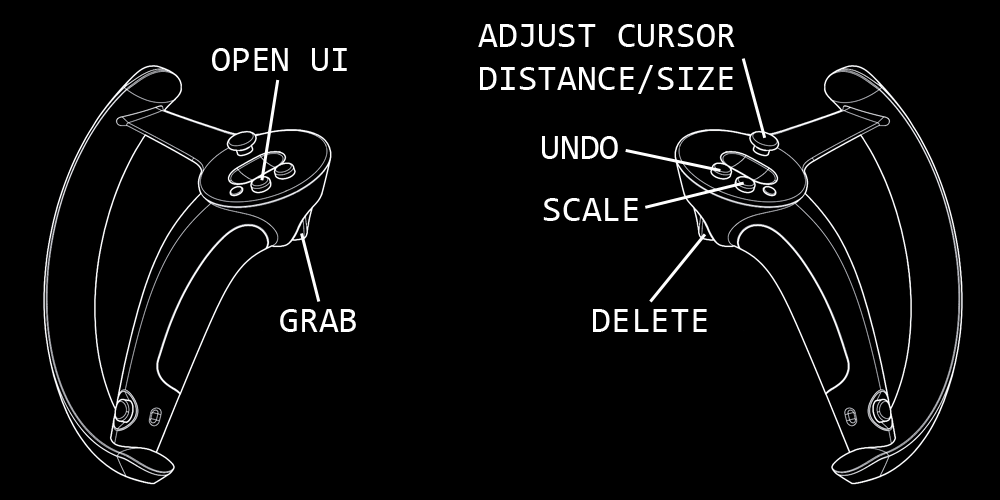
<style>
.page{position:relative;width:1000px;height:500px;background:#000000}
.page>*{position:absolute;margin:0}
.t1{font:36px "Consolas";color:#ffffff}
</style>
<div class="page">
<p class="t1" style="left:478px;top:24px;width:257px;height:70px">ADJUST CURSOR<br>DISTANCE/SIZE</p>
<p class="t1" style="left:212px;top:48px;width:135px;height:23px">OPEN UI</p>
<p class="t1" style="left:542px;top:136px;width:76px;height:23px">UNDO</p>
<p class="t1" style="left:543px;top:198px;width:95px;height:23px">SCALE</p>
<p class="t1" style="left:280px;top:309px;width:76px;height:23px">GRAB</p>
<p class="t1" style="left:593px;top:309px;width:114px;height:23px">DELETE</p>
</div>
